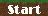
<style>
.page{position:relative;width:48px;height:16px;background:#ffffff}
.page>*{position:absolute;margin:0}
.t1{font:12.5px "Broadway";color:#ffffff}
</style>
<div class="page">
<p class="t1" style="left:8px;top:5px;width:33px;height:9px">Start</p>
</div>
